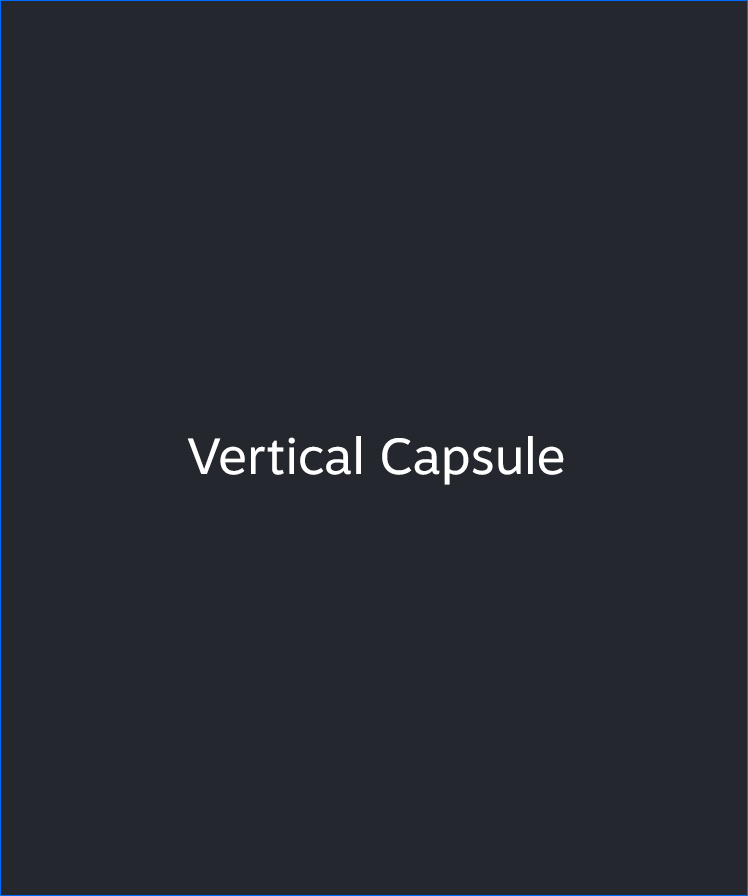
<style>
.page{position:relative;width:748px;height:896px;background:#24282e}
.page>*{position:absolute;margin:0}
.t1{font:50.6px "MotivaSans-Regular";color:#ffffff}
</style>
<div class="page">
<p class="t1" style="left:187px;top:436px;width:377px;height:49px">Vertical Capsule</p>
</div>
